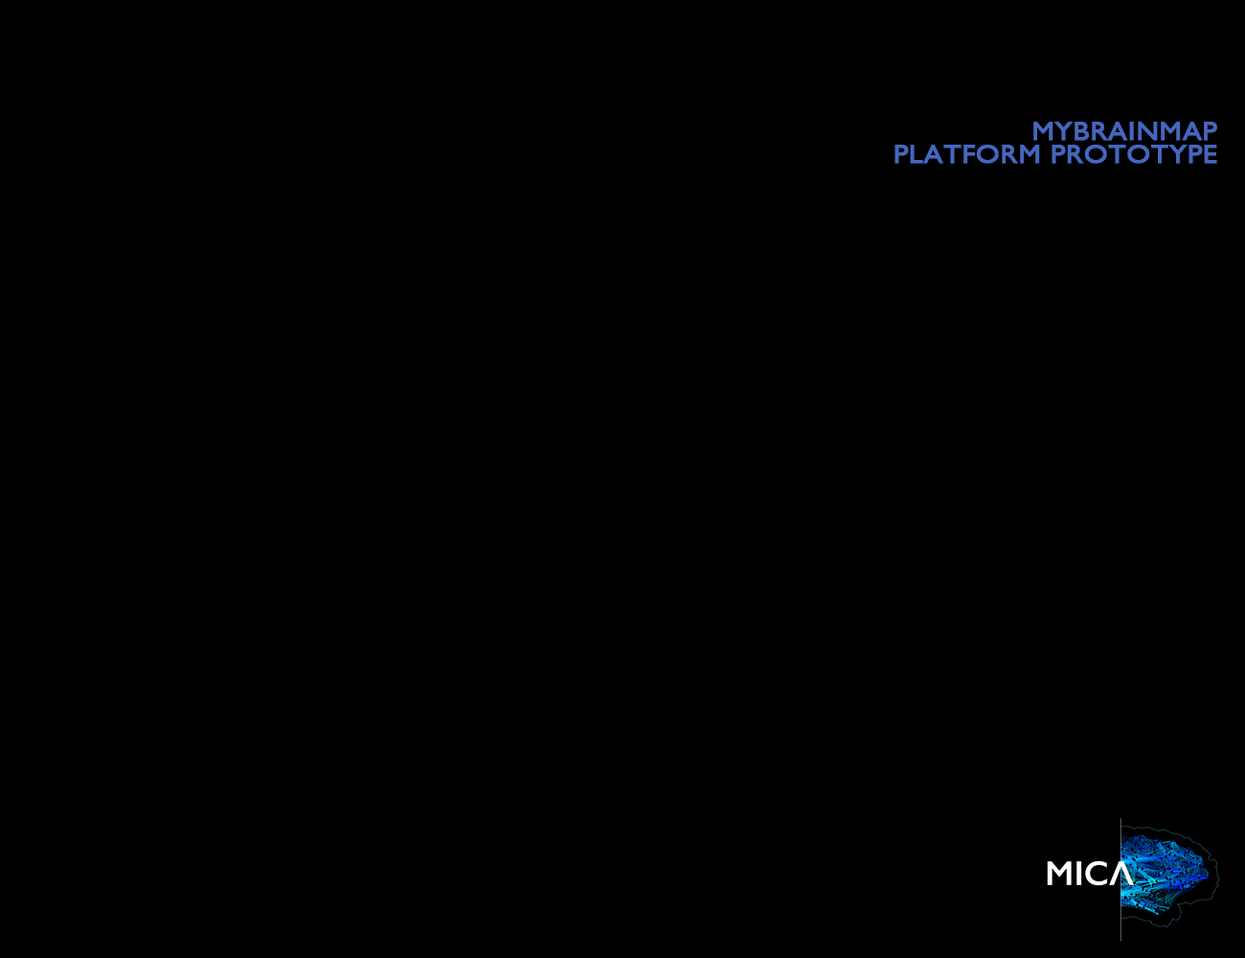
<style>
.page{position:relative;width:1245px;height:958px;background:#000000}
.page>*{position:absolute;margin:0}
.t1{font:25.9px/23px "GillSans";color:#4666be;font-weight:bold;scale:1.11 1}
</style>
<div class="page">
<p class="t1" style="left:895px;top:122px;width:322px;height:42px;text-align:right">MYBRAINMAP<br>PLATFORM PROTOTYPE</p>
</div>
